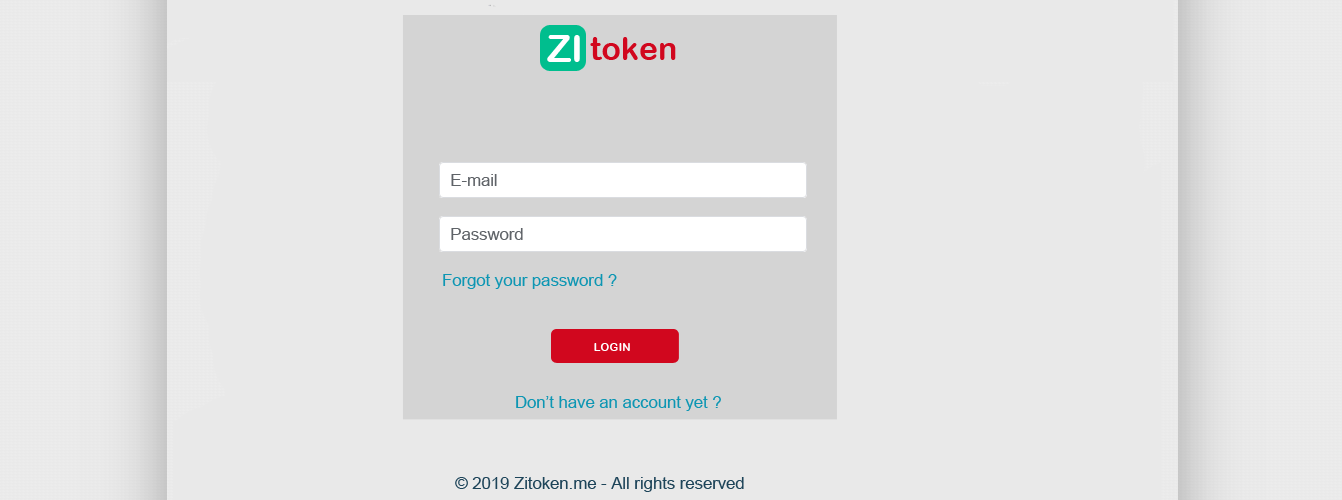
<style>
.page{position:relative;width:1342px;height:500px;background:#e9e9e9}
.page>*{position:absolute;margin:0}
.t1{font:37.5px "ArialRoundedMTBold";color:#ffffff}
.t2{font:32px "ArialRoundedMTBold";color:#d1071e}
.t3{font:32px "ArialRoundedMTBold";color:#00be8e}
.t4{font:16.7px "ArialMT";color:#5f6368}
.t5{font:16.7px "ArialMT";color:#0d96b3}
.t6{font:11.4px "ArialRoundedMTBold";color:#ffffff}
.t7{font:16.7px "ArialMT";color:#1d4459}
</style>
<div class="page">
<p class="t1" style="left:547px;top:35px;width:33px;height:27px">ZI</p>
<p class="t2" style="left:590px;top:37px;width:86px;height:23px"><span class="t3">    </span>token</p>
<p class="t4" style="left:451px;top:174px;width:46px;height:12px">E-mail</p>
<p class="t4" style="left:451px;top:228px;width:72px;height:12px">Password</p>
<p class="t5" style="left:443px;top:274px;width:174px;height:15px">Forgot your password ?</p>
<p class="t6" style="left:594px;top:343px;width:36px;height:8px">LOGIN</p>
<p class="t5" style="left:516px;top:396px;width:205px;height:15px">Don’t have an account yet ?</p>
<p class="t7" style="left:455px;top:477px;width:289px;height:15px">© 2019 Zitoken.me - All rights reserved</p>
</div>
